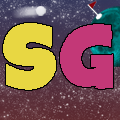
<style>
.page{position:relative;width:120px;height:120px}
.page>*{position:absolute;margin:0}
.t1{font:48px "SpaceComics";color:#e8d742}
.t2{font:48px "SpaceComics";color:#c33877}
</style>
<div class="page">
<p class="t1" style="left:3px;top:23px;width:53px;height:67px">S</p>
<p class="t2" style="left:60px;top:24px;width:53px;height:65px">G</p>
</div>
